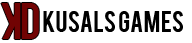
<style>
.page{position:relative;width:192px;height:43px;background:#ffffff}
.page>*{position:absolute;margin:0}
.t1{font:40px "Bebas";color:#710303}
.t2{font:23px "Bebas";color:#000000}
</style>
<div class="page">
<p class="t1" style="left:1px;top:3px;width:20px;height:36px;rotate:180deg">K</p>
<p class="t1" style="left:21px;top:3px;width:18px;height:36px">d</p>
<p class="t2" style="left:43px;top:11px;width:140px;height:21px">kUSALS gAMES</p>
</div>
